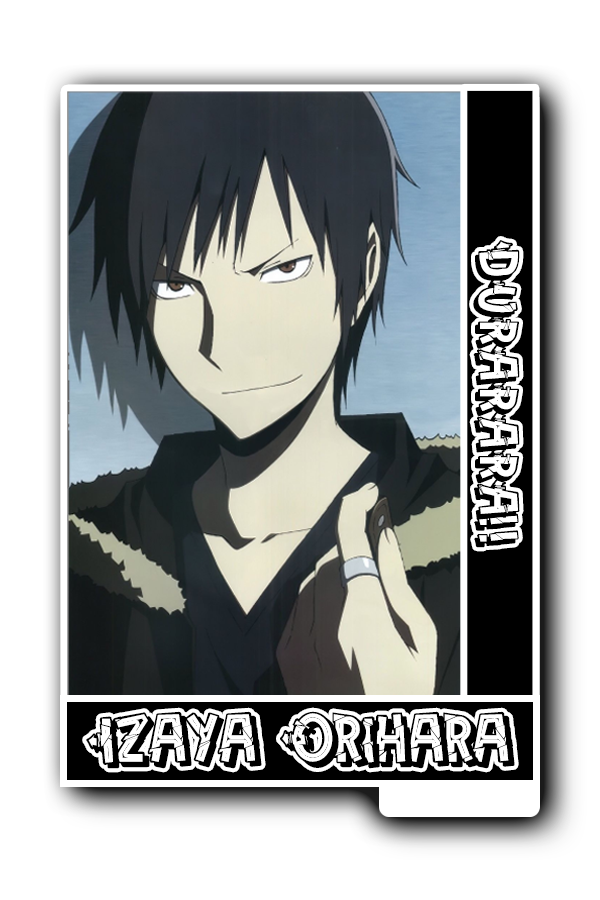
<style>
.page{position:relative;width:600px;height:900px;background:#ffffff}
.page>*{position:absolute;margin:0}
.t1{font:61px "PeintureFraiche";color:#000000}
.t2{font:75px "PeintureFraiche";color:#000000}
</style>
<div class="page">
<p class="t1" style="left:473px;top:239px;width:47px;height:309px;rotate:90deg">DURARARA!!</p>
<p class="t2" style="left:86px;top:711px;width:429px;height:58px">Izaya Orihara</p>
</div>
